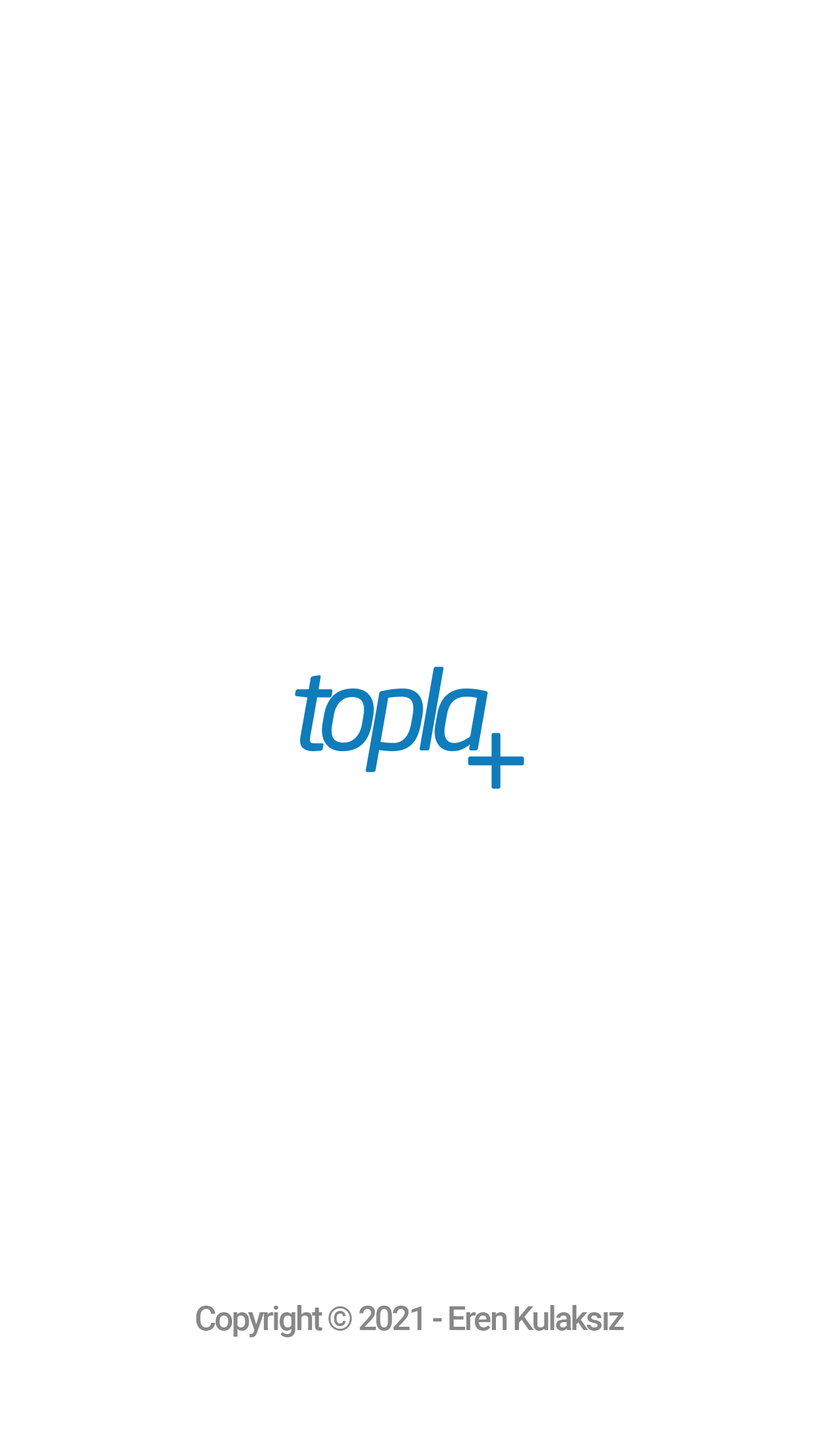
<style>
.page{position:relative;width:819px;height:1456px;background:#ffffff}
.page>*{position:absolute;margin:0}
.t1{font:33.4px "Roboto-Medium";letter-spacing:-0.06em;color:#878787}
</style>
<div class="page">
<p class="t1" style="left:196px;top:1305px;width:428px;height:32px">Copyright © 2021 - Eren Kulaksız</p>
</div>
